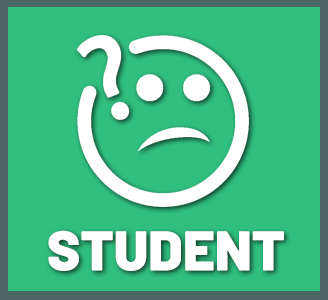
<style>
.page{position:relative;width:328px;height:300px;background:#30bf7f}
.page>*{position:absolute;margin:0}
.t1{font:56px "Barlow-Black";color:#ffffff}
</style>
<div class="page">
<p class="t1" style="left:48px;top:230px;width:236px;height:41px">STUDENT</p>
</div>
